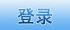
<style>
.page{position:relative;width:70px;height:30px}
.page>*{position:absolute;margin:0}
.t1{font:18px "AdobeHeitiStd-Regular"}
</style>
<div class="page">
<p class="t1" style="left:17px;top:8px;width:35px;height:17px">登录</p>
</div>
